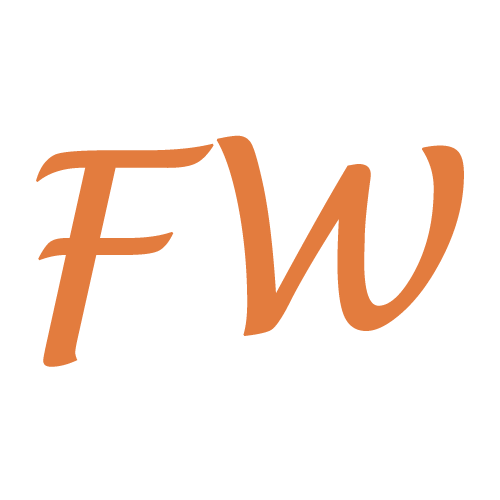
<style>
.page{position:relative;width:500px;height:500px;background:#ffffff}
.page>*{position:absolute;margin:0}
.t1{font:247.5px "LucidaHandwriting-Italic";letter-spacing:0.05em;color:#e37c3e;font-weight:bold;scale:1.11 1}
</style>
<div class="page">
<p class="t1" style="left:36px;top:135px;width:428px;height:232px">FW</p>
</div>
